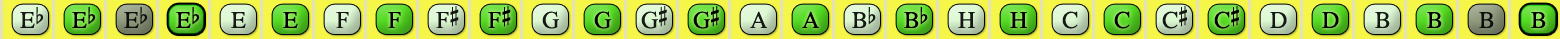
<style>
.page{position:relative;width:1560px;height:39px;background:#f6f649}
.page>*{position:absolute;margin:0}
.t1{font:24px "OpusChords";color:#000000}
.t2{font:24px "OpusChords";letter-spacing:-0.025em;color:#000000}
</style>
<div class="page">
<p class="t1" style="left:436px;top:6px;width:23px;height:22px;opacity:0.9">F#</p>
<p class="t1" style="left:488px;top:6px;width:23px;height:22px">F#</p>
<p class="t2" style="left:641px;top:6px;width:26px;height:23px;opacity:0.9">G#</p>
<p class="t2" style="left:693px;top:6px;width:26px;height:23px">G#</p>
<p class="t1" style="left:1162px;top:6px;width:25px;height:23px;opacity:0.9">C#</p>
<p class="t1" style="left:1214px;top:6px;width:25px;height:23px">C#</p>
<p class="t1" style="left:20px;top:7px;width:24px;height:21px;opacity:0.9">Eb</p>
<p class="t1" style="left:72px;top:7px;width:24px;height:21px">Eb</p>
<p class="t1" style="left:124px;top:7px;width:24px;height:21px;opacity:0.9">Eb</p>
<p class="t1" style="left:176px;top:7px;width:24px;height:21px">Eb</p>
<p class="t1" style="left:231px;top:12px;width:15px;height:16px;opacity:0.9">E</p>
<p class="t1" style="left:283px;top:12px;width:15px;height:16px">E</p>
<p class="t1" style="left:336px;top:12px;width:13px;height:16px;opacity:0.9">F</p>
<p class="t1" style="left:388px;top:12px;width:13px;height:16px">F</p>
<p class="t1" style="left:542px;top:11px;width:17px;height:18px;opacity:0.9">G</p>
<p class="t1" style="left:594px;top:11px;width:17px;height:18px">G</p>
<p class="t1" style="left:750px;top:11px;width:17px;height:17px;opacity:0.9">A</p>
<p class="t1" style="left:802px;top:11px;width:17px;height:17px">A</p>
<p class="t1" style="left:852px;top:7px;width:24px;height:21px;opacity:0.9">Bb</p>
<p class="t1" style="left:904px;top:7px;width:24px;height:21px">Bb</p>
<p class="t1" style="left:958px;top:12px;width:17px;height:16px;opacity:0.9">H</p>
<p class="t1" style="left:1010px;top:12px;width:17px;height:16px">H</p>
<p class="t1" style="left:1062px;top:11px;width:16px;height:18px;opacity:0.9">C</p>
<p class="t1" style="left:1114px;top:11px;width:16px;height:18px">C</p>
<p class="t1" style="left:1270px;top:12px;width:17px;height:16px;opacity:0.9">D</p>
<p class="t1" style="left:1322px;top:12px;width:17px;height:16px">D</p>
<p class="t1" style="left:1375px;top:12px;width:15px;height:16px;opacity:0.9">B</p>
<p class="t1" style="left:1427px;top:12px;width:15px;height:16px">B</p>
<p class="t1" style="left:1479px;top:12px;width:15px;height:16px;opacity:0.9">B</p>
<p class="t1" style="left:1531px;top:12px;width:15px;height:16px">B</p>
</div>
